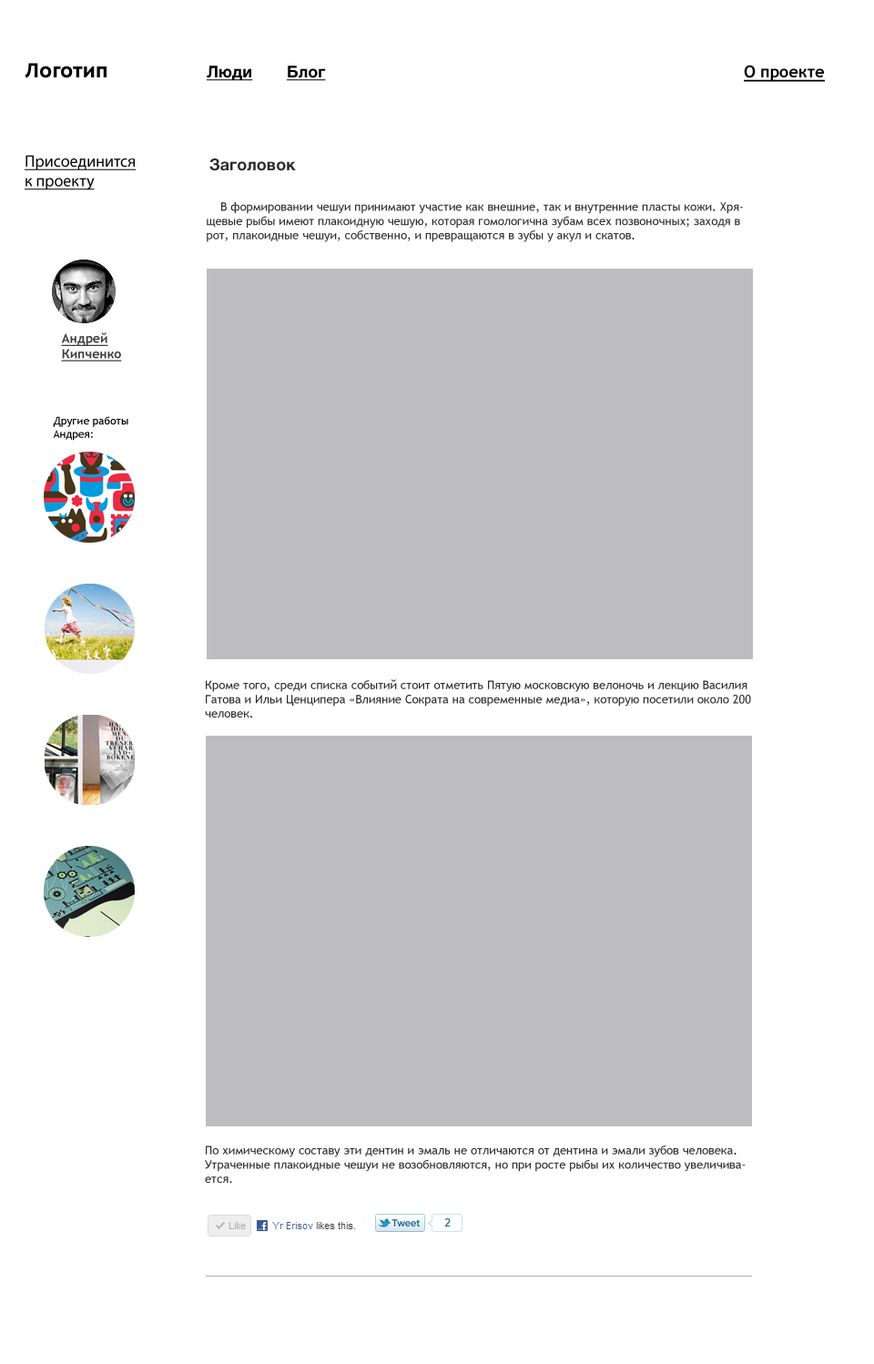
<style>
.page{position:relative;width:874px;height:1364px;background:#ffffff}
.page>*{position:absolute;margin:0}
.t1{font:21.9px "OksanaSansNarrow-Bold";color:#000000}
.t2{font:16.4px "HelveticaNeueLTCYR-Bold";color:#000000;text-decoration:underline}
.t3{font:16.4px "TrebuchetMS-Bold";color:#000000;text-decoration:underline}
.t4{font:16.4px "MyriadPro-Regular";color:#000000;text-decoration:underline}
.t5{font:16.4px "HelveticaNeueLTCYR-Bold";color:#2c2c2c}
.t6{font:11.8px "TrebuchetMS";color:#2c2c2c}
.t7{font:12.7px "TrebuchetMS-Bold";color:#3d3d3d;text-decoration:underline}
.t8{font:10.9px "TrebuchetMS";color:#000000}
</style>
<div class="page">
<p class="t1" style="left:25px;top:63px;width:82px;height:15px">Логотип</p>
<p class="t2" style="left:207px;top:66px;width:46px;height:15px">Люди</p>
<p class="t2" style="left:287px;top:66px;width:39px;height:15px">Блог</p>
<p class="t3" style="left:744px;top:65px;width:81px;height:17px">О проекте</p>
<p class="t4" style="left:25px;top:155px;width:112px;height:35px">Присоединится<br>к проекту</p>
<p class="t5" style="left:209px;top:158px;width:87px;height:13px">Заголовок</p>
<p class="t6" style="left:207px;top:202px;width:536px;height:40px">В формировании чешуи принимают участие как внешние, так и внутренние пласты кожи. Хрящевые рыбы имеют плакоидную чешую, которая гомологична зубам всех позвоночных; заходя в рот, плакоидные чешуи, собственно, и превращаются в зубы у акул и скатов.</p>
<p class="t7" style="left:61px;top:332px;width:61px;height:30px">Андрей<br>Кипченко</p>
<p class="t8" style="left:53px;top:416px;width:75px;height:25px">Другие работы<br>Андрея:</p>
<p class="t6" style="left:205px;top:679px;width:546px;height:39px">Кроме того, среди списка событий стоит отметить Пятую московскую велоночь и лекцию Василия Гатова и Ильи Ценципера «Влияние Сократа на современные медиа», которую посетили около 200 человек.</p>
<p class="t6" style="left:205px;top:1146px;width:541px;height:38px">По химическому составу эти дентин и эмаль не отличаются от дентина и эмали зубов человека. Утраченные плакоидные чешуи не возобновляются, но при росте рыбы их количество увеличивается.</p>
</div>
